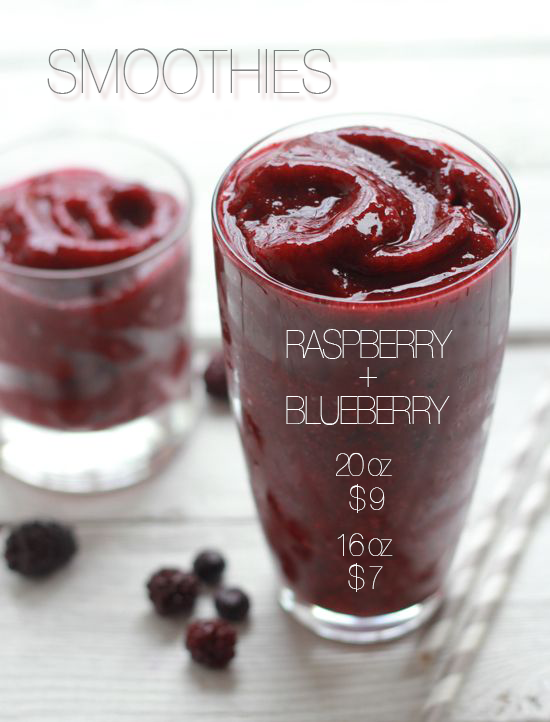
<style>
.page{position:relative;width:550px;height:722px}
.page>*{position:absolute;margin:0}
.t1{font:61.5px "HelveticaNeue-UltraLight";letter-spacing:0.02em;color:#828383;text-transform:uppercase;scale:0.86 1}
.t2{font:38.9px "HelveticaNeue-UltraLight";letter-spacing:-0.04em;color:#ffffff;text-transform:uppercase;scale:0.86 1}
.t3{font:33.4px "HelveticaNeue-UltraLight";letter-spacing:-0.08em;color:#fffefe;text-transform:uppercase;scale:0.86 1}
.t4{font:33.4px "HelveticaNeue-UltraLight";letter-spacing:-0.08em;color:#fffefe;scale:0.86 1}
.t5{font:33.4px "HelveticaNeue-UltraLight";letter-spacing:-0.08em;color:#ffffff;scale:0.86 1}
.t6{font:33.4px/67.2px "HelveticaNeue-UltraLight";letter-spacing:-0.08em;color:#ffffff;scale:0.86 1}
.t7{font:33.4px/67.2px "HelveticaNeue-UltraLight";letter-spacing:-0.08em;color:#ffffff;text-transform:uppercase;scale:0.86 1}
</style>
<div class="page">
<p class="t1" style="left:47px;top:48px;width:285px;height:46px">Smoothies</p>
<p class="t2" style="left:286px;top:329px;width:167px;height:30px">raspberry</p>
<p class="t2" style="left:359px;top:367px;width:18px;height:20px">+</p>
<p class="t2" style="left:286px;top:396px;width:164px;height:29px">blueberry</p>
<p class="t3" style="left:336px;top:453px;width:56px;height:23px">20<span class="t4"> oz</span></p>
<p class="t5" style="left:349px;top:484px;width:36px;height:29px">$ 9</p>
<p class="t6" style="left:337px;top:533px;width:56px;height:23px"><span class="t7">16 </span>oz   <br> oz</p>
<p class="t5" style="left:348px;top:563px;width:35px;height:29px">$ 7</p>
</div>
